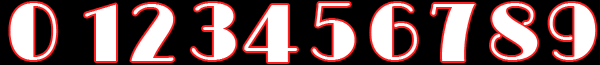
<style>
.page{position:relative;width:600px;height:65px;background:#000000}
.page>*{position:absolute;margin:0}
.t1{font:80px "Limelight-Regular";letter-spacing:0.1em;color:#ffffff;text-transform:uppercase}
</style>
<div class="page">
<p class="t1" style="left:10px;top:3px;width:47px;height:57px">0</p>
<p class="t1" style="left:85px;top:4px;width:31px;height:57px">1</p>
<p class="t1" style="left:131px;top:4px;width:43px;height:57px">2</p>
<p class="t1" style="left:191px;top:3px;width:45px;height:57px">3</p>
<p class="t1" style="left:244px;top:5px;width:54px;height:57px">4</p>
<p class="t1" style="left:312px;top:3px;width:43px;height:57px">5</p>
<p class="t1" style="left:371px;top:3px;width:46px;height:57px">6</p>
<p class="t1" style="left:431px;top:4px;width:44px;height:57px">7</p>
<p class="t1" style="left:491px;top:3px;width:47px;height:57px">8</p>
<p class="t1" style="left:549px;top:3px;width:47px;height:57px">9</p>
</div>
